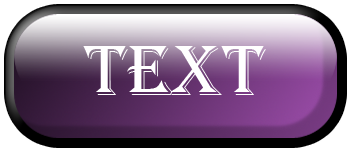
<style>
.page{position:relative;width:352px;height:152px}
.page>*{position:absolute;margin:0}
.t1{font:73px "Algerian";color:#ffffff}
</style>
<div class="page">
<p class="t1" style="left:83px;top:46px;width:183px;height:49px">TEXT</p>
</div>
